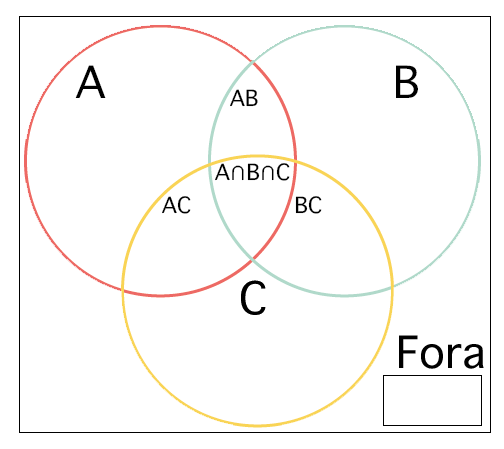
<style>
.page{position:relative;width:504px;height:449px;background:#ffffff}
.page>*{position:absolute;margin:0}
.t1{font:60.3px "AppleSymbols";color:#000000}
.t2{font:30.4px "AppleSymbols";color:#000000}
</style>
<div class="page">
<p class="t1" style="left:75px;top:65px;width:31px;height:33px">A</p>
<p class="t1" style="left:396px;top:65px;width:22px;height:33px">B</p>
<p class="t2" style="left:230px;top:89px;width:28px;height:18px">AB</p>
<p class="t2" style="left:215px;top:163px;width:75px;height:18px">A∩B∩C</p>
<p class="t2" style="left:162px;top:196px;width:29px;height:18px">AC</p>
<p class="t2" style="left:295px;top:196px;width:27px;height:18px">BC</p>
<p class="t1" style="left:241px;top:280px;width:25px;height:35px">C</p>
<p class="t1" style="left:241px;top:280px;width:25px;height:35px">C</p>
<p class="t1" style="left:399px;top:335px;width:85px;height:34px">Fora</p>
</div>
